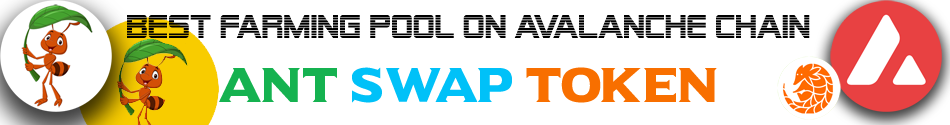
<style>
.page{position:relative;width:950px;height:125px;background:#ffffff}
.page>*{position:absolute;margin:0}
.t1{font:33px "AlienEncounters";color:#000000}
.t2{font:48px "UniversalSerif";color:#f86f00}
.t3{font:48px "UniversalSerif";color:#15b250}
.t4{font:48px "UniversalSerif";color:#00c1f8}
</style>
<div class="page">
<p class="t1" style="left:127px;top:15px;width:683px;height:23px">Best Farming Pool on Avalanche Chain</p>
<p class="t2" style="left:219px;top:67px;width:498px;height:36px"><span class="t3">ANT </span><span class="t4">SWAP</span> TOKEN</p>
</div>
